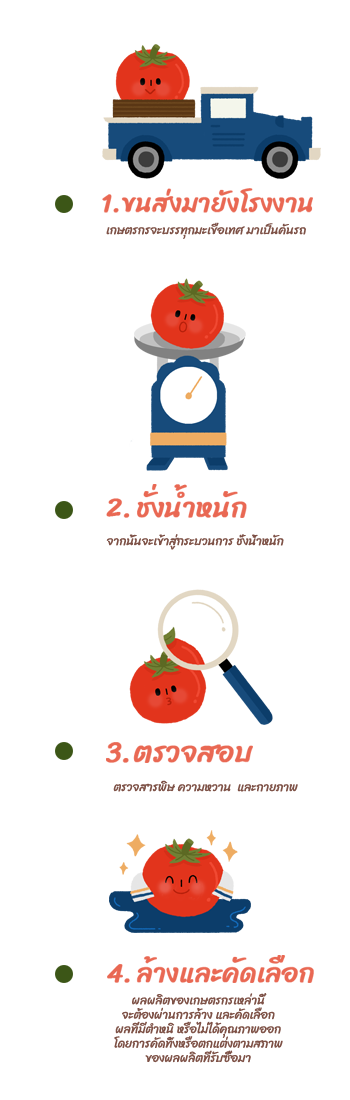
<style>
.page{position:relative;width:350px;height:1100px;background:#ffffff}
.page>*{position:absolute;margin:0}
.t1{font:12px "Sriracha-Regular";color:#7e5247}
</style>
<div class="page">
<p class="t1" style="left:106px;top:222px;width:200px;height:17px">เกษตรกรจะบรรทุกมะเขือเทศ มาเป็นคันรถ</p>
<p class="t1" style="left:106px;top:534px;width:178px;height:16px">จากนั้นจะเข้าสู่กระบวนการ ชั่งน้ำหนัก</p>
<p class="t1" style="left:113px;top:780px;width:185px;height:12px">ตรวจสารพิษ ความหวาน  และกายภาพ</p>
<p class="t1" style="left:114px;top:993px;width:169px;height:70px;text-align:center">ผลผลิตของเกษตรกรเหล่านี้ <br>จะต้องผ่านการล้าง และคัดเลือก <br>ผลที่มีตำหนิ หรือไม่ได้คุณภาพออก <br>โดยการคัดทิ้งหรือตกแต่งตามสภาพ <br>ของผลผลิตที่รับซื้อมา</p>
</div>
